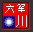
<style>
.page{position:relative;width:33px;height:32px;background:#f20000}
.page>*{position:absolute;margin:0}
.t1{font:10.4px "SimSun";color:#ffffff}
.t2{font:11.7px "SimSun";color:#ffffff}
</style>
<div class="page">
<p class="t1" style="left:5px;top:4px;width:20px;height:9px">六军</p>
<p class="t2" style="left:16px;top:15px;width:11px;height:12px">川</p>
</div>
